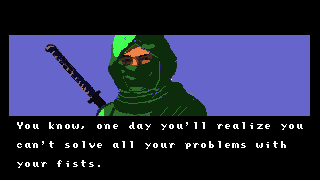
<style>
.page{position:relative;width:320px;height:180px;background:#000000}
.page>*{position:absolute;margin:0}
.t1{font:8px "PressStartReg";color:#ffffff}
</style>
<div class="page">
<p class="t1" style="left:17px;top:122px;width:286px;height:46px">You know, one day you’ll realize you<br><br>can’t solve all your problems with<br><br>your fists.</p>
</div>
